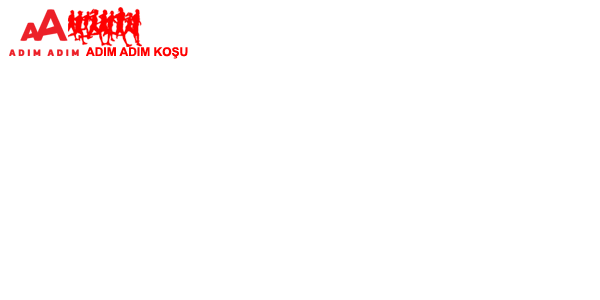
<style>
.page{position:relative;width:600px;height:300px;background:#ffffff}
.page>*{position:absolute;margin:0}
.t1{font:12px "Arial-BoldMT";color:#ff0000}
</style>
<div class="page">
<p class="t1" style="left:86px;top:47px;width:102px;height:12px">ADIM ADIM KOŞU</p>
</div>
